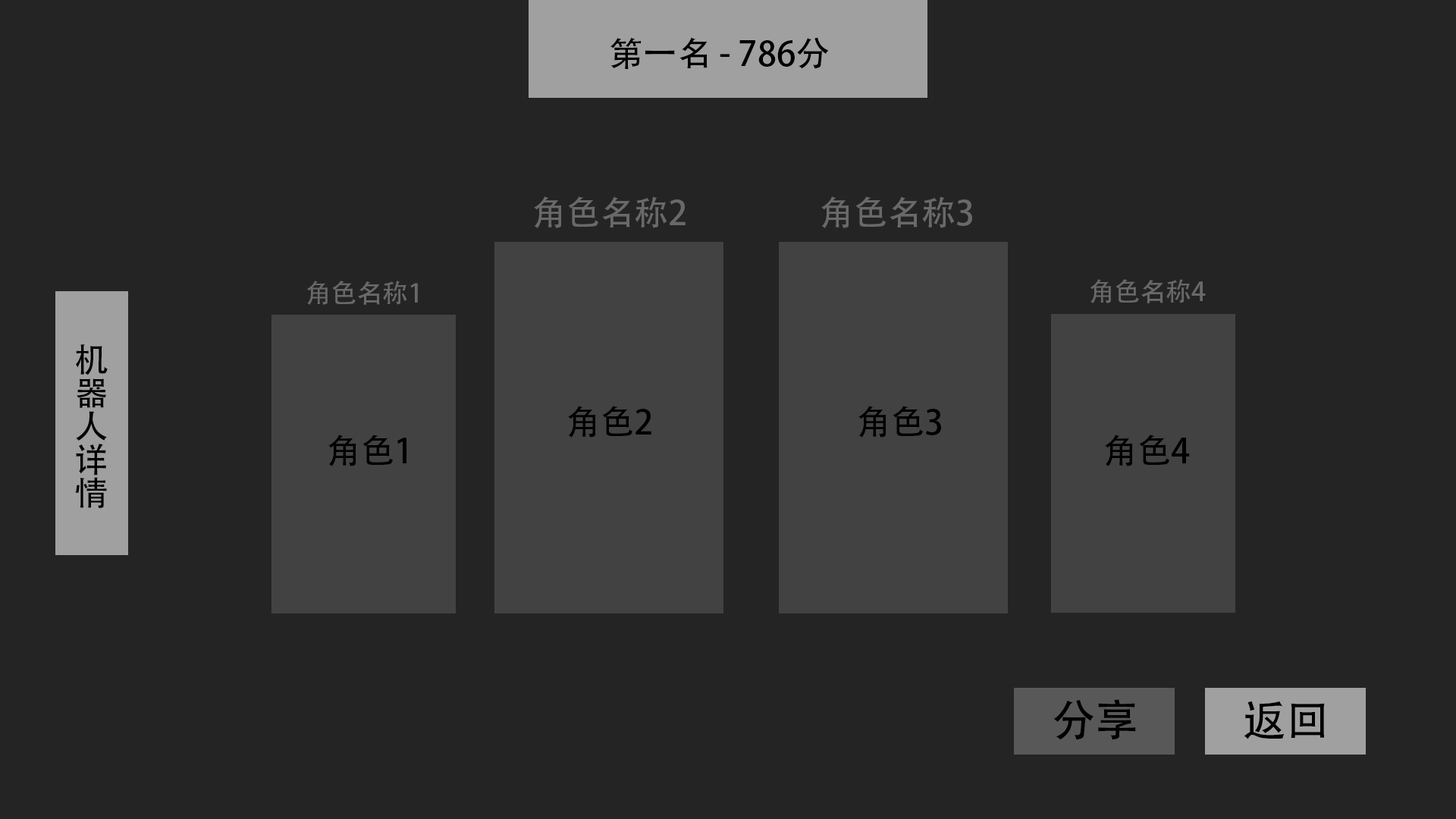
<style>
.page{position:relative;width:1456px;height:819px;background:#242424}
.page>*{position:absolute;margin:0}
.t1{font:34px "AdobeHeitiStd-Regular";color:#000000}
.t2{font:34px "AdobeHeitiStd-Regular";color:#696969}
.t3{font:25.7px "AdobeHeitiStd-Regular";color:#696969}
.t4{font:34px/33.4px "AdobeHeitiStd-Regular";color:#000000}
.t5{font:43.7px "AdobeHeitiStd-Regular";color:#000000}
</style>
<div class="page">
<p class="t1" style="left:610px;top:37px;width:219px;height:32px">第一名 - 786分</p>
<p class="t2" style="left:534px;top:196px;width:152px;height:32px">角色名称2</p>
<p class="t2" style="left:821px;top:196px;width:151px;height:32px">角色名称3</p>
<p class="t3" style="left:307px;top:281px;width:111px;height:24px">角色名称1</p>
<p class="t3" style="left:1090px;top:279px;width:116px;height:24px">角色名称4</p>
<p class="t4" style="left:75px;top:344px;width:33px;height:164px;text-align:center">机<br>器<br>人<br>详<br>情</p>
<p class="t1" style="left:568px;top:406px;width:83px;height:32px">角色2</p>
<p class="t1" style="left:858px;top:406px;width:83px;height:32px">角色3</p>
<p class="t1" style="left:328px;top:435px;width:78px;height:31px">角色1</p>
<p class="t1" style="left:1105px;top:435px;width:85px;height:31px">角色4</p>
<p class="t5" style="left:1054px;top:699px;width:82px;height:41px">分享</p>
<p class="t5" style="left:1244px;top:701px;width:81px;height:38px">返回</p>
</div>
